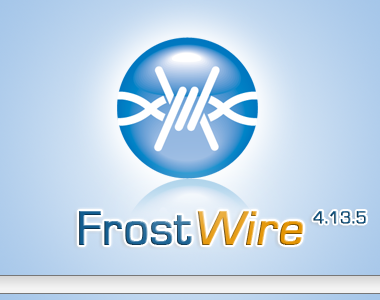
<style>
.page{position:relative;width:380px;height:300px}
.page>*{position:absolute;margin:0}
.t1{font:50px "EurostileRegular";font-weight:bold}
.t2{font:50px "EurostileRegular";font-weight:bold;font-style:italic}
.t3{font:18px "EurostileRegular";font-weight:bold}
</style>
<div class="page">
<p class="t1" style="left:79px;top:211px;width:224px;height:34px">Frost<span class="t2">Wire</span></p>
<p class="t3" style="left:313px;top:211px;width:54px;height:13px">4.13.5</p>
</div>
